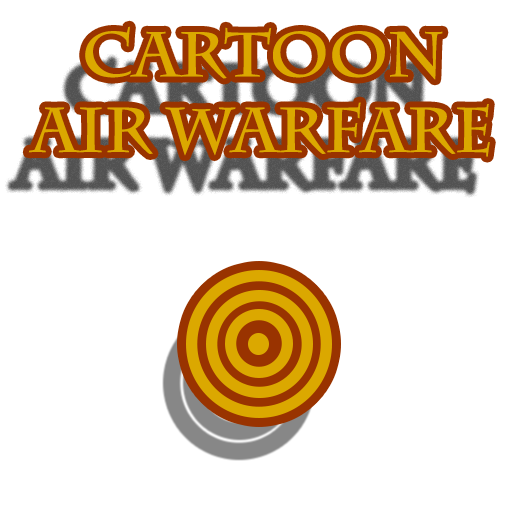
<style>
.page{position:relative;width:512px;height:512px;background:#ffffff}
.page>*{position:absolute;margin:0}
.t1{font:63px "CharlemagneStd-Bold";color:#dba800}
</style>
<div class="page">
<p class="t1" style="left:28px;top:26px;width:462px;height:131px;text-align:center">Cartoon<br>Air Warfare</p>
</div>
